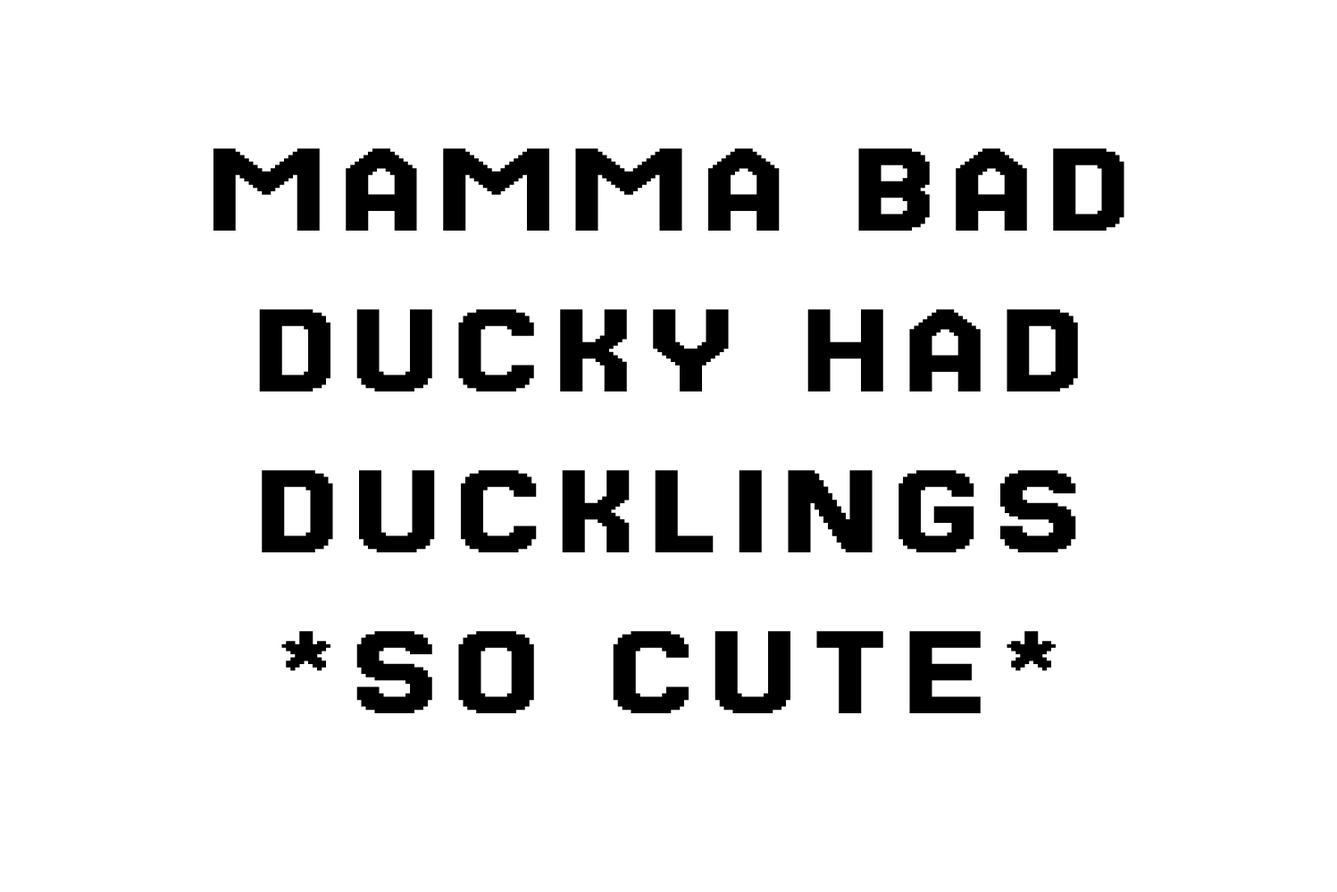
<style>
.page{position:relative;width:1337px;height:892px;background:#ffffff}
.page>*{position:absolute;margin:0}
.t1{font:134px "Jersey25-Regular";letter-spacing:0.05em;color:#000000;scale:1.35 1}
</style>
<div class="page">
<p class="t1" style="left:214px;top:148px;width:911px;height:565px;text-align:center">MAMMA BAD<br>DUCKY HAD<br>DUCKLINGS<br>*SO CUTE*</p>
</div>
